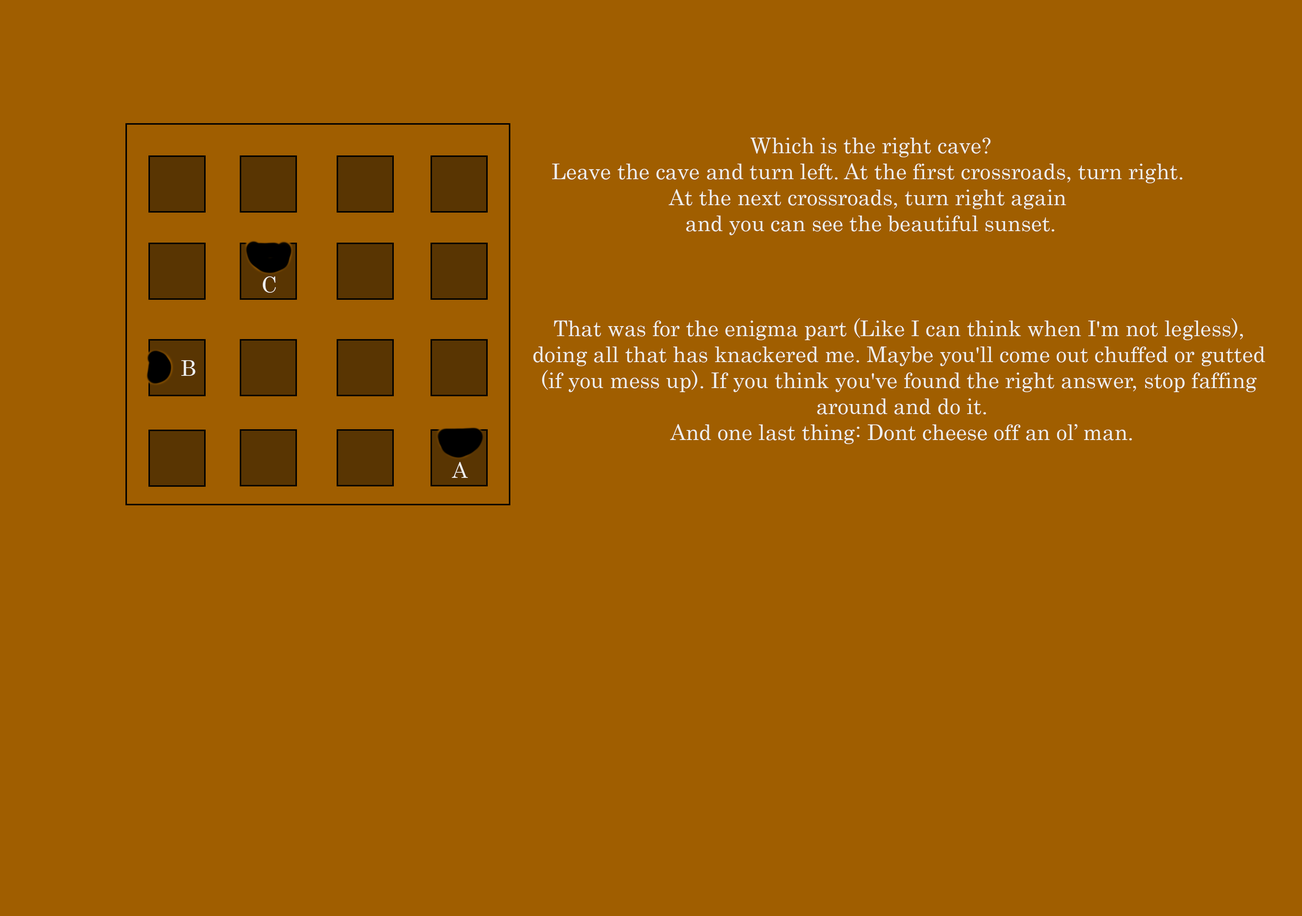
<style>
.page{position:relative;width:1302px;height:916px;background:#a05e00}
.page>*{position:absolute;margin:0}
.t1{font:21.6px "Century";color:#eeeeee}
</style>
<div class="page">
<p class="t1" style="left:552px;top:138px;width:630px;height:97px;text-align:center">Which is the right cave?<br>Leave the cave and turn left. At the first crossroads, turn right. <br>At the next crossroads, turn right again <br>and you can see the beautiful sunset.</p>
<p class="t1" style="left:263px;top:276px;width:13px;height:17px">C</p>
<p class="t1" style="left:533px;top:318px;width:732px;height:126px;text-align:center">That was for the enigma part (Like I can think when I'm not legless), <br>doing all that has knackered me. Maybe you'll come out chuffed or gutted <br>(if you mess up). If you think you've found the right answer, stop faffing <br>around and do it.<br>And one last thing: Dont cheese off an ol’ man.</p>
<p class="t1" style="left:181px;top:360px;width:15px;height:16px">B</p>
<p class="t1" style="left:452px;top:462px;width:16px;height:16px">A</p>
</div>
